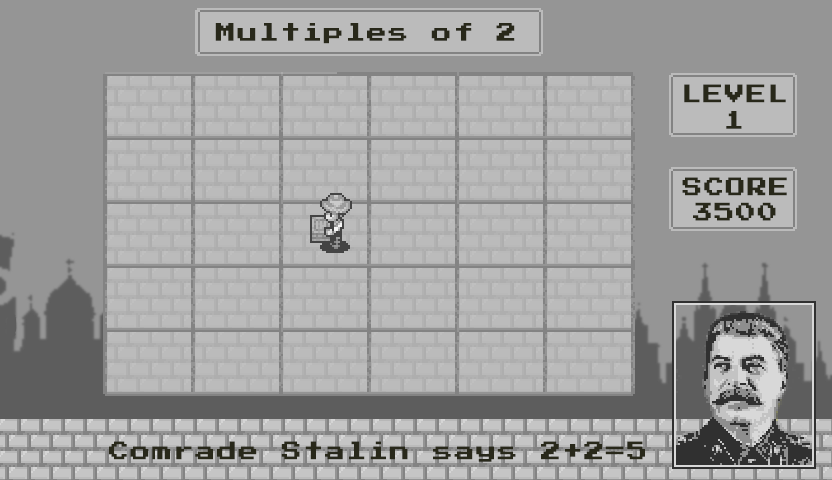
<style>
.page{position:relative;width:832px;height:480px;background:#959595}
.page>*{position:absolute;margin:0}
.t1{font:20px "PressStart2P-Regular";letter-spacing:0.08em;color:#28281a}
</style>
<div class="page">
<p class="t1" style="left:215px;top:23px;width:300px;height:21px">Multiples of 2</p>
<p class="t1" style="left:684px;top:84px;width:102px;height:19px">LEVEL</p>
<p class="t1" style="left:726px;top:111px;width:16px;height:18px">1</p>
<p class="t1" style="left:682px;top:177px;width:105px;height:19px">SCORE</p>
<p class="t1" style="left:693px;top:202px;width:83px;height:19px">3500</p>
<p class="t1" style="left:109px;top:441px;width:536px;height:21px">Comrade Stalin says 2+2=5</p>
</div>
